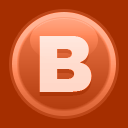
<style>
.page{position:relative;width:128px;height:128px;background:#a52e00}
.page>*{position:absolute;margin:0}
.t1{font:78px "Arial-Black";color:#ffdbcd}
</style>
<div class="page">
<p class="t1" style="left:39px;top:36px;width:53px;height:56px">B</p>
</div>
